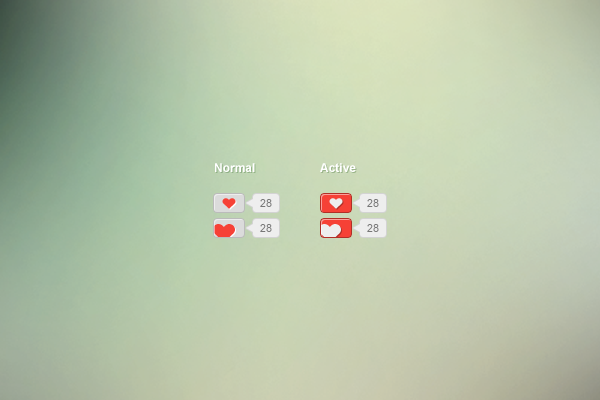
<style>
.page{position:relative;width:600px;height:400px}
.page>*{position:absolute;margin:0}
.t1{font:12px "Arial-BoldMT";color:#ffffff}
.t2{font:11px "ArialMT";color:#777777}
</style>
<div class="page">
<p class="t1" style="left:215px;top:163px;width:40px;height:9px">Normal</p>
<p class="t1" style="left:320px;top:163px;width:36px;height:9px">Active</p>
<p class="t2" style="left:260px;top:199px;width:12px;height:8px">28</p>
<p class="t2" style="left:367px;top:199px;width:12px;height:8px">28</p>
<p class="t2" style="left:260px;top:224px;width:12px;height:8px">28</p>
<p class="t2" style="left:367px;top:224px;width:12px;height:8px">28</p>
</div>
